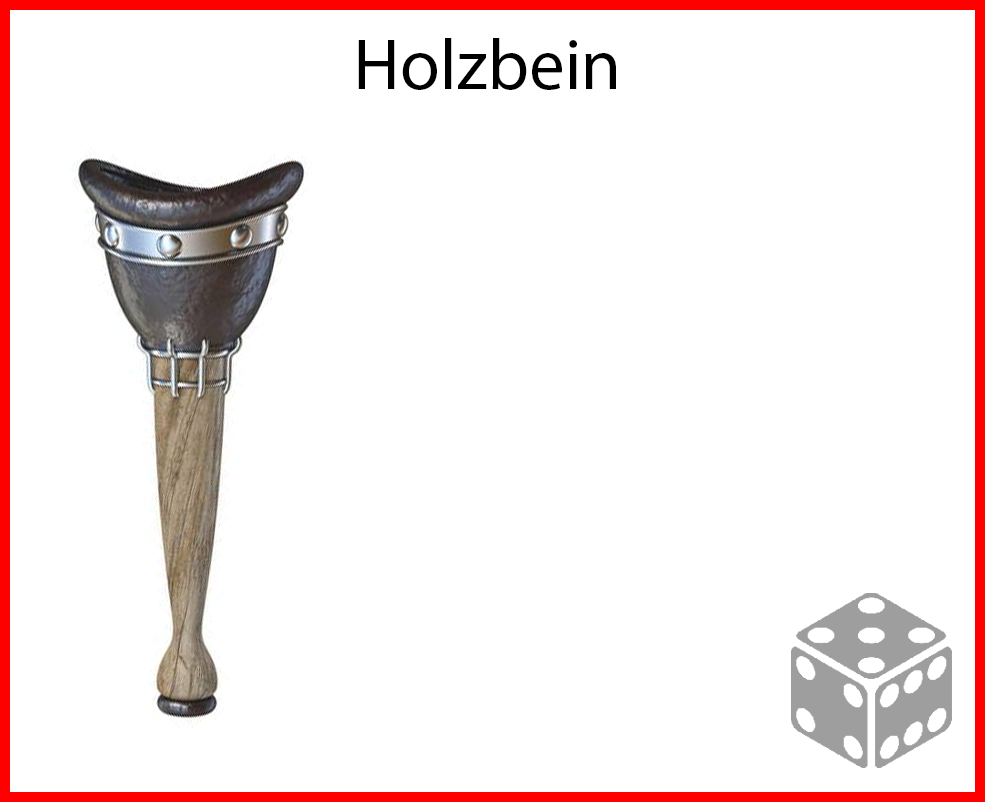
<style>
.page{position:relative;width:985px;height:802px;background:#ffffff}
.page>*{position:absolute;margin:0}
.t1{font:72px "MyriadPro-Regular";color:#000000}
</style>
<div class="page">
<p class="t1" style="left:358px;top:38px;width:258px;height:52px">Holzbein</p>
</div>
